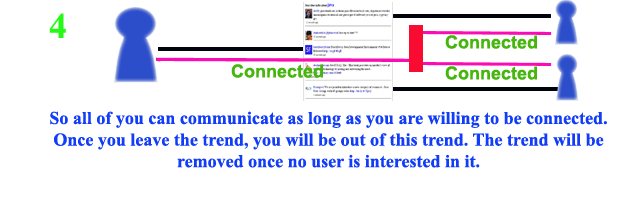
<style>
.page{position:relative;width:624px;height:200px;background:#ffffff}
.page>*{position:absolute;margin:0}
.t1{font:18px "Arial-BoldMT";color:#46b60c}
.t2{font:18px "TimesNewRomanPS-BoldMT";color:#113cf8}
</style>
<div class="page">
<p class="t1" style="left:445px;top:35px;width:92px;height:14px">Connected</p>
<p class="t1" style="left:231px;top:64px;width:92px;height:14px">Connected</p>
<p class="t1" style="left:445px;top:66px;width:92px;height:14px">Connected</p>
<p class="t2" style="left:50px;top:111px;width:557px;height:57px;text-align:center">So all of you can communicate as long as you are willing to be connected. Once you leave the trend, you will be out of this trend. The trend will be removed once no user is interested in it.</p>
</div>
